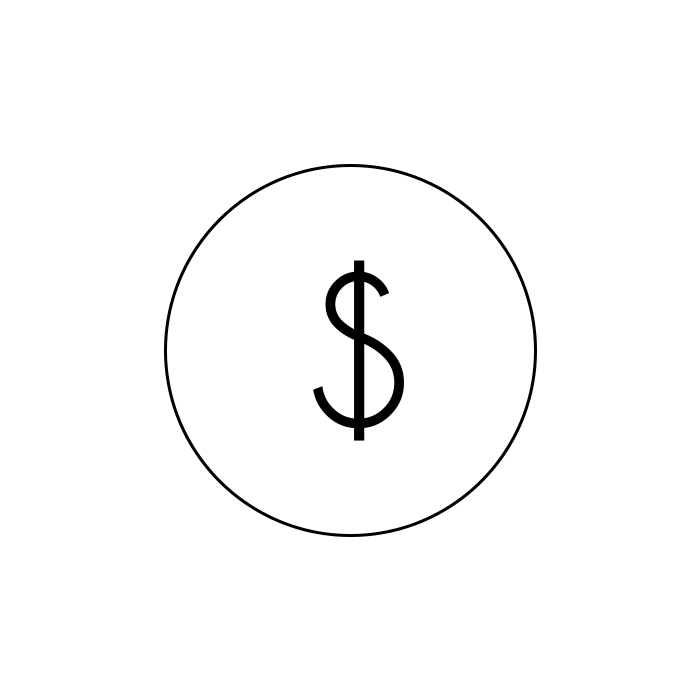
<style>
.page{position:relative;width:700px;height:700px;background:#ffffff}
.page>*{position:absolute;margin:0}
.t1{font:259.4px "Champagne&Limousines";letter-spacing:0.025em;color:#000000}
</style>
<div class="page">
<p class="t1" style="left:313px;top:260px;width:91px;height:181px">$</p>
</div>
